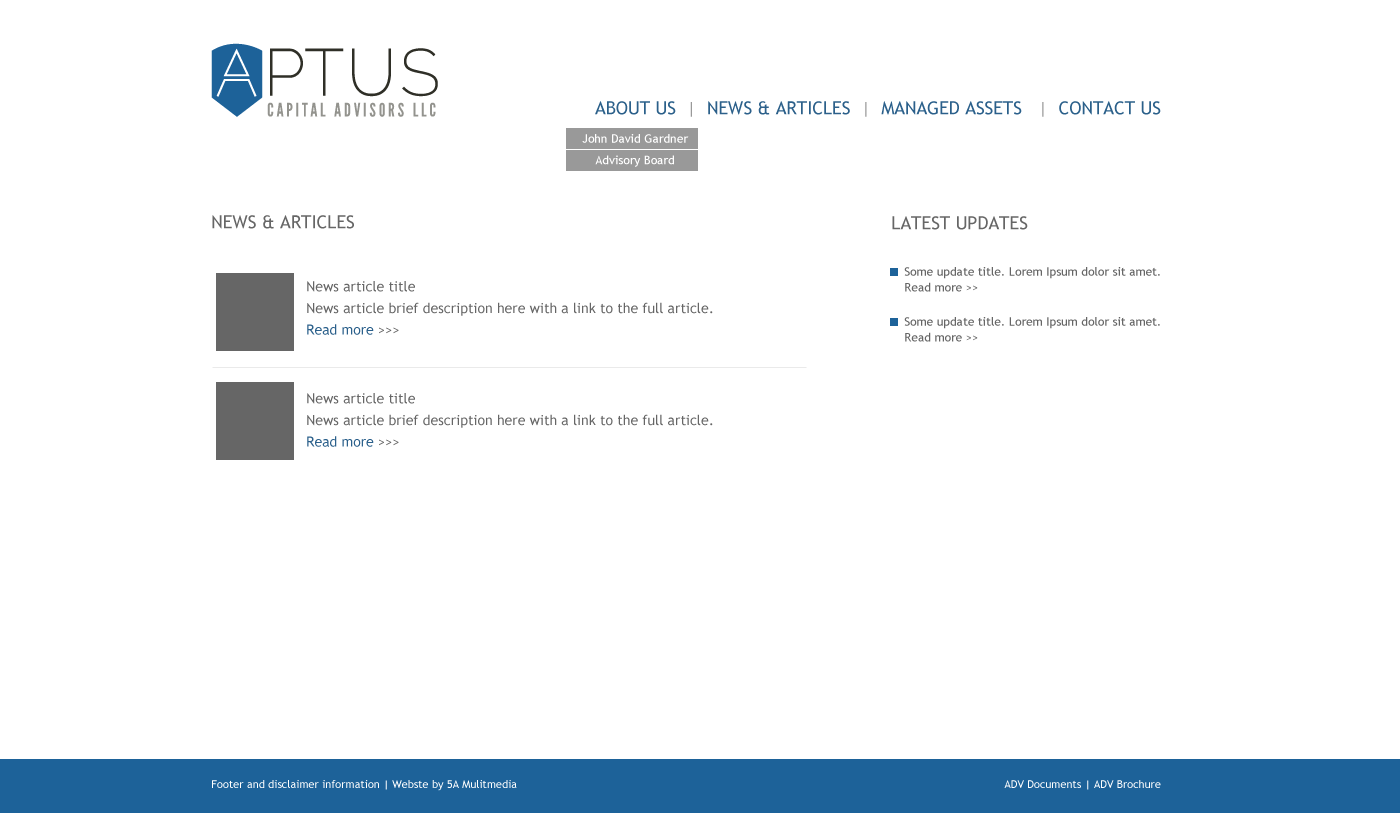
<style>
.page{position:relative;width:1400px;height:813px;background:#ffffff}
.page>*{position:absolute;margin:0}
.t1{font:18px "TrebuchetMS";color:#2c608a;text-transform:uppercase}
.t2{font:18px "TrebuchetMS";color:#2b608a;text-transform:uppercase}
.t3{font:18px "TrebuchetMS";color:#999999;text-transform:uppercase}
.t4{font:18px "TrebuchetMS";color:#2b608b;text-transform:uppercase}
.t5{font:12px/21.6px "TrebuchetMS";color:#ffffff}
.t6{font:18px "TrebuchetMS";color:#666666;text-transform:uppercase}
.t7{font:12px/15.6px "TrebuchetMS";color:#666666}
.t8{font:14px/21.6px "TrebuchetMS";color:#666666}
.t9{font:14px/21.6px "TrebuchetMS";color:#2b608b}
.t10{font:11px "TrebuchetMS";color:#ffffff}
</style>
<div class="page">
<p class="t1" style="left:595px;top:101px;width:566px;height:16px"><span class="t2">About Us  </span><span class="t3">|  </span>News &amp; Articles  <span class="t3">|  </span><span class="t4">Managed Assets   </span><span class="t3">|  </span><span class="t2">Contact Us</span></p>
<p class="t5" style="left:582px;top:134px;width:107px;height:33px;text-align:center">John David Gardner<br>Advisory Board</p>
<p class="t6" style="left:212px;top:215px;width:142px;height:14px">News &amp; Articles</p>
<p class="t6" style="left:892px;top:216px;width:136px;height:14px">Latest Updates</p>
<p class="t7" style="left:904px;top:267px;width:256px;height:25px">Some update title. Lorem Ipsum dolor sit amet. Read more &gt;&gt;</p>
<p class="t8" style="left:307px;top:281px;width:406px;height:54px">News article title<br>News article brief description here with a link to the full article.<br><span class="t9">Read more</span> &gt;&gt;&gt;</p>
<p class="t7" style="left:904px;top:317px;width:256px;height:25px">Some update title. Lorem Ipsum dolor sit amet. Read more &gt;&gt;</p>
<p class="t8" style="left:307px;top:393px;width:406px;height:54px">News article title<br>News article brief description here with a link to the full article.<br><span class="t9">Read more</span> &gt;&gt;&gt;</p>
<p class="t10" style="left:212px;top:780px;width:949px;height:11px">Footer and disclaimer information | Webste by 5A Mulitmedia                                       ADV Documents | ADV Brochure</p>
</div>
